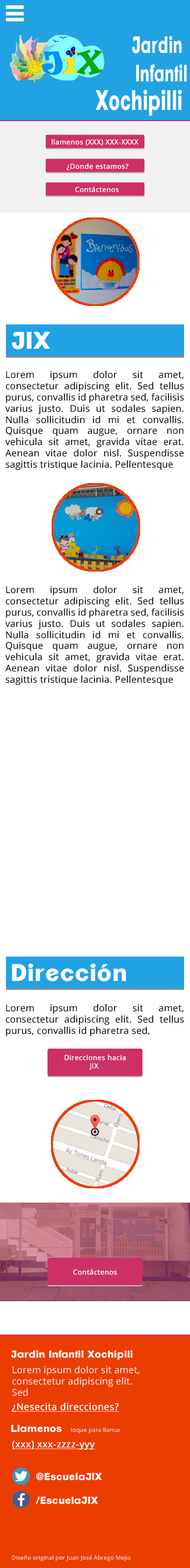
<style>
.page{position:relative;width:190px;height:1568px;background:#ffffff}
.page>*{position:absolute;margin:0}
.t1{font:22.8px/28.5px "ClementePDao-Heavy";letter-spacing:0.02em;color:#ffffff;scale:0.65 1}
.t2{font:27.5px/28.5px "ClementePDao-Heavy";letter-spacing:0.02em;color:#ffffff;scale:0.65 1}
.t3{font:7px "OpenSans";letter-spacing:0.02em;color:#ffffff;font-weight:bold}
.t4{font:23.6px "ClementePDao-Heavy";letter-spacing:0.02em;color:#ffffff}
.t5{font:9.4px "OpenSans";letter-spacing:0.02em;color:#000000}
.t6{font:10px "ClementePDao-Heavy";letter-spacing:0.02em;color:#ffffff}
.t7{font:9.4px "OpenSans";letter-spacing:0.02em;color:#ffffff}
.t8{font:9.4px "OpenSans";letter-spacing:0.02em;color:#ffffff;font-weight:bold;text-decoration:underline}
.t9{font:5.8px "OpenSans";letter-spacing:0.02em;color:#f4f4f4}
</style>
<div class="page">
<p class="t1" style="left:96px;top:36px;width:91px;height:80px;text-align:right">Jardin <br>Infantil<br><span class="t2">Xochipilli</span></p>
<p class="t3" style="left:52px;top:139px;width:87px;height:7px">llamenos (XXX) XXX-XXXX</p>
<p class="t3" style="left:67px;top:163px;width:62px;height:8px">¿Donde estamos?</p>
<p class="t3" style="left:75px;top:187px;width:44px;height:6px">Contáctenos</p>
<p class="t4" style="left:12px;top:332px;width:39px;height:17px">JIX</p>
<p class="t5" style="left:5px;top:371px;width:179px;height:99px;text-align:justify">Lorem ipsum dolor sit amet, consectetur adipiscing elit. Sed tellus purus, convallis id pharetra sed, facilisis varius justo. Duis ut sodales sapien. Nulla sollicitudin id mi et convallis. Quisque quam augue, ornare non vehicula sit amet, gravida vitae erat. Aenean vitae dolor nisl. Suspendisse sagittis tristique lacinia. Pellentesque</p>
<p class="t5" style="left:5px;top:586px;width:179px;height:99px;text-align:justify">Lorem ipsum dolor sit amet, consectetur adipiscing elit. Sed tellus purus, convallis id pharetra sed, facilisis varius justo. Duis ut sodales sapien. Nulla sollicitudin id mi et convallis. Quisque quam augue, ornare non vehicula sit amet, gravida vitae erat. Aenean vitae dolor nisl. Suspendisse sagittis tristique lacinia. Pellentesque</p>
<p class="t4" style="left:12px;top:963px;width:114px;height:19px">Dirección</p>
<p class="t5" style="left:6px;top:1004px;width:178px;height:32px;text-align:justify">Lorem ipsum dolor sit amet, consectetur adipiscing elit. Sed tellus purus, convallis id pharetra sed,</p>
<p class="t3" style="left:65px;top:1055px;width:61px;height:15px;text-align:center">Direcciones hacia<br>JIX</p>
<p class="t3" style="left:73px;top:1269px;width:44px;height:6px">Contáctenos</p>
<p class="t6" style="left:11px;top:1350px;width:122px;height:10px">Jardin Infantil Xochipili</p>
<p class="t7" style="left:12px;top:1366px;width:128px;height:30px;text-align:justify">Lorem ipsum dolor sit amet,<br>consectetur adipiscing elit. <br>Sed</p>
<p class="t8" style="left:12px;top:1403px;width:107px;height:9px">¿Nesecita direcciones?</p>
<p class="t6" style="left:11px;top:1425px;width:51px;height:8px">Llamenos</p>
<p class="t9" style="left:71px;top:1427px;width:50px;height:7px">toque para llamar</p>
<p class="t8" style="left:12px;top:1440px;width:83px;height:10px">(xxx) xxx-zzzz-yyy</p>
<p class="t6" style="left:36px;top:1472px;width:66px;height:9px">@EscuelaJIX</p>
<p class="t6" style="left:36px;top:1497px;width:62px;height:7px">/EscuelaJIX</p>
<p class="t9" style="left:12px;top:1555px;width:119px;height:6px">Diseño original por Juan José Abrego Mejia</p>
</div>
